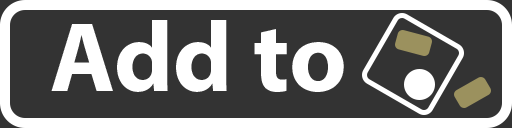
<style>
.page{position:relative;width:512px;height:128px;background:#333333}
.page>*{position:absolute;margin:0}
.t1{font:100px "MyriadPro-Bold";color:#ffffff}
</style>
<div class="page">
<p class="t1" style="left:51px;top:20px;width:293px;height:72px">Add to</p>
</div>
